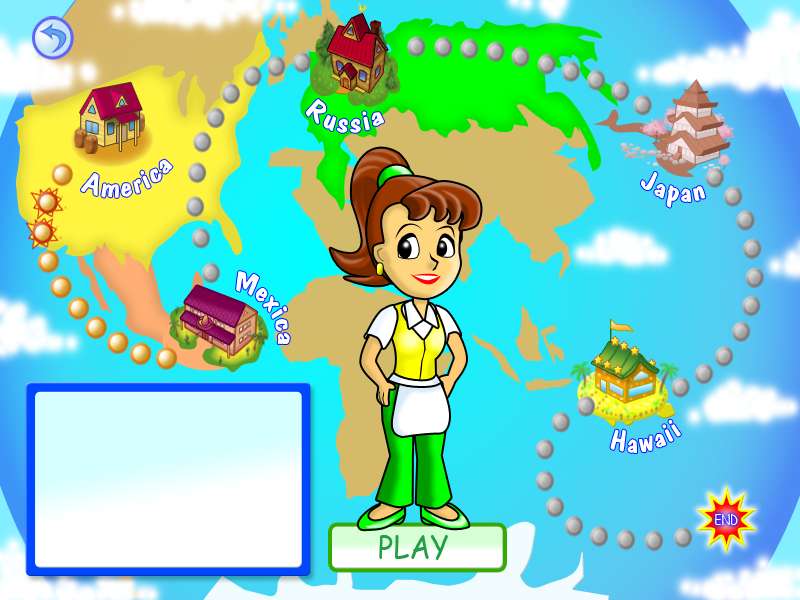
<style>
.page{position:relative;width:800px;height:600px}
.page>*{position:absolute;margin:0}
.t1{font:29.1px "DomCasualBT-Regular";letter-spacing:0.01em;color:#ffffff;scale:0.89 1}
.t2{font:28.7px "DomCasualBT-Regular";letter-spacing:0.01em;color:#ffffff;scale:0.91 1}
.t3{font:28.6px "DomCasualBT-Regular";letter-spacing:0.01em;color:#ffffff;scale:0.92 1}
.t4{font:27.3px "DomCasualBT-Regular";letter-spacing:0.01em;color:#ffffff}
.t5{font:29px "DomCasualBT-Regular";letter-spacing:0.01em;color:#ffffff;scale:0.89 1}
.t6{font:14.9px "ComicSansMS";letter-spacing:0.01em;color:#fffefe;scale:0.72 1}
.t7{font:32.2px "ComicSansMS";letter-spacing:0.01em;color:#239d46;scale:0.88 1}
</style>
<div class="page">
<p class="t1" style="left:305px;top:99px;width:80px;height:34px;rotate:6deg">Russia</p>
<p class="t2" style="left:80px;top:159px;width:93px;height:39px;rotate:-15deg">America</p>
<p class="t3" style="left:641px;top:172px;width:65px;height:36px;rotate:10deg">Japan</p>
<p class="t4" style="left:236px;top:271px;width:54px;height:73px;rotate:52deg">Mexica</p>
<p class="t5" style="left:610px;top:419px;width:71px;height:34px;rotate:-12deg">Hawaii</p>
<p class="t6" style="left:715px;top:514px;width:23px;height:11px">END</p>
<p class="t7" style="left:379px;top:535px;width:69px;height:25px">PLAY</p>
</div>
